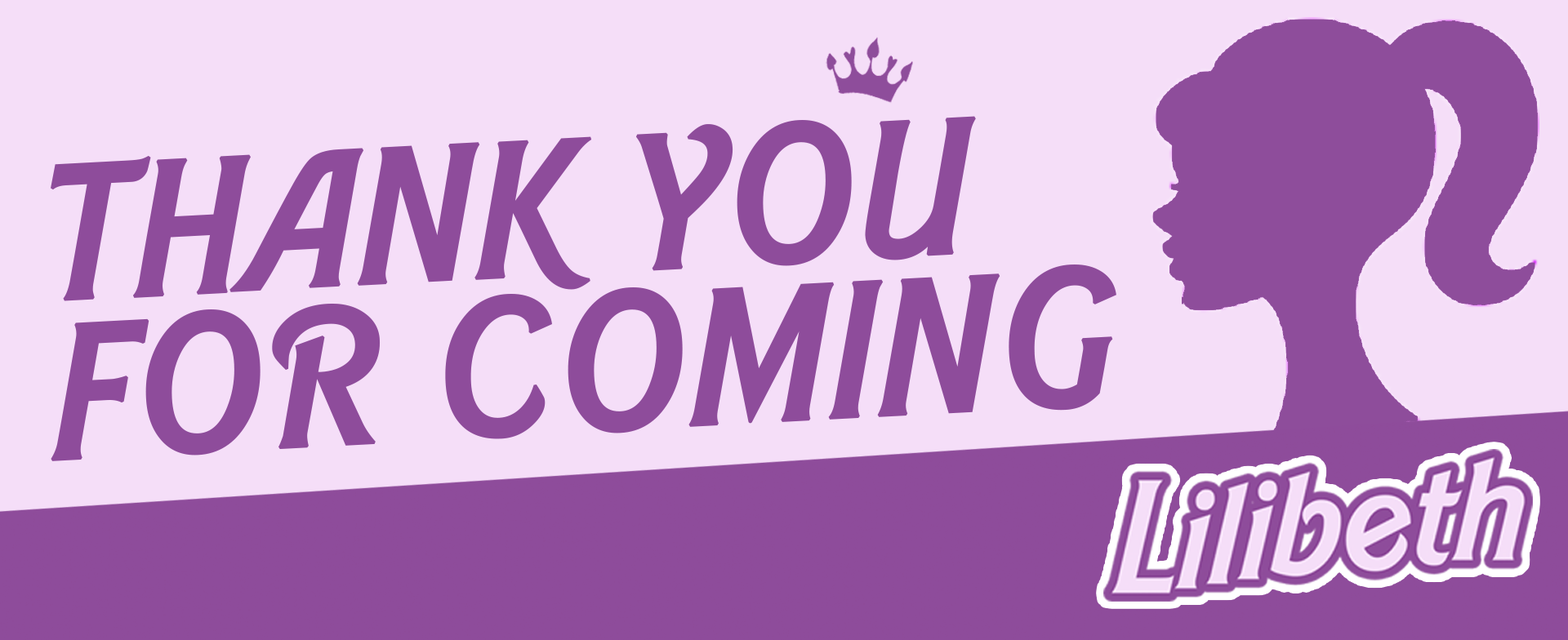
<style>
.page{position:relative;width:1568px;height:640px;background:#f5def8}
.page>*{position:absolute;margin:0}
.t1{font:185.2px/158.8px "BarbieMediumItalic";color:#8e4c9a;font-weight:bold}
</style>
<div class="page">
<p class="t1" style="left:51px;top:116px;width:1065px;height:345px;rotate:-3deg">THANK YOU <br>FOR COMING</p>
</div>
